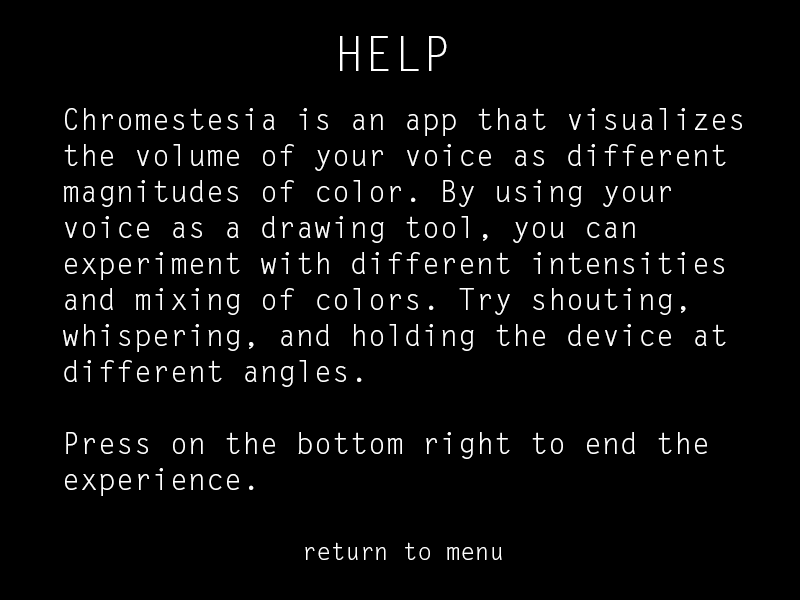
<style>
.page{position:relative;width:800px;height:600px;background:#000000}
.page>*{position:absolute;margin:0}
.t1{font:48px "LetterGothicStd";color:#ffffff}
.t2{font:30px "LetterGothicStd";color:#ffffff}
.t3{font:24px "LetterGothicStd";color:#ffffff}
</style>
<div class="page">
<p class="t1" style="left:340px;top:36px;width:107px;height:35px">HELP</p>
<p class="t2" style="left:63px;top:108px;width:679px;height:388px">Chromestesia is an app that visualizes<br>the volume of your voice as different<br>magnitudes of color. By using your<br>voice as a drawing tool, you can <br>experiment with different intensities <br>and mixing of colors. Try shouting,<br>whispering, and holding the device at<br>different angles. <br><br>Press on the bottom right to end the <br>experience.</p>
<p class="t3" style="left:305px;top:542px;width:197px;height:18px">return to menu</p>
</div>
